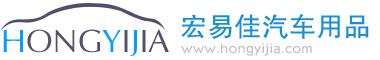
<style>
.page{position:relative;width:380px;height:60px;background:#ffffff}
.page>*{position:absolute;margin:0}
.t1{font:26.9px "FZHTK--GBK1-0";color:#168ed9}
.t2{font:32.2px "FZWBJW--GB1-0";color:#4f4f6e}
.t3{font:32.2px "FZWBJW--GB1-0";color:#029dff}
.t4{font:16.1px "FZJHJW-GB1-0";color:#c2c2c2}
</style>
<div class="page">
<p class="t1" style="left:181px;top:14px;width:188px;height:25px">宏易佳汽车用品</p>
<p class="t2" style="left:3px;top:29px;width:166px;height:28px"><span class="t3">H</span>ONG<span class="t3">Y</span>I<span class="t3">J</span>IA</p>
<p class="t4" style="left:181px;top:43px;width:131px;height:13px">www.hongyijia.com</p>
</div>
